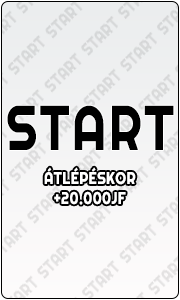
<style>
.page{position:relative;width:180px;height:300px}
.page>*{position:absolute;margin:0}
.t1{font:62.5px "Righteous-Regular";letter-spacing:0.035em;color:#000000;font-weight:bold;scale:0.8 1}
.t2{font:16.7px "Righteous-Regular";letter-spacing:0.035em;color:#ffffff;font-weight:bold;scale:0.8 1}
</style>
<div class="page">
<p class="t1" style="left:7px;top:105px;width:167px;height:45px">START</p>
<p class="t2" style="left:44px;top:167px;width:92px;height:38px;text-align:center">ÁTLÉPÉSKOR<br>+20.000JF</p>
</div>
